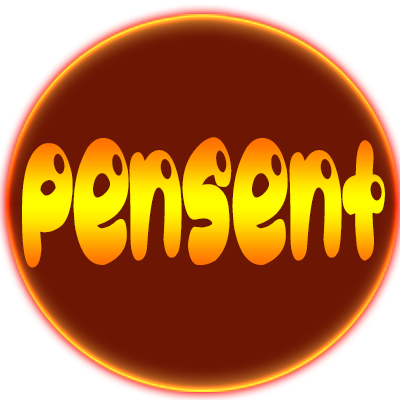
<style>
.page{position:relative;width:400px;height:400px;background:#6d1603}
.page>*{position:absolute;margin:0}
.t1{font:133.3px "JuicyFruity";scale:0.45 1}
</style>
<div class="page">
<p class="t1" style="left:22px;top:137px;width:363px;height:131px">pensent</p>
</div>
